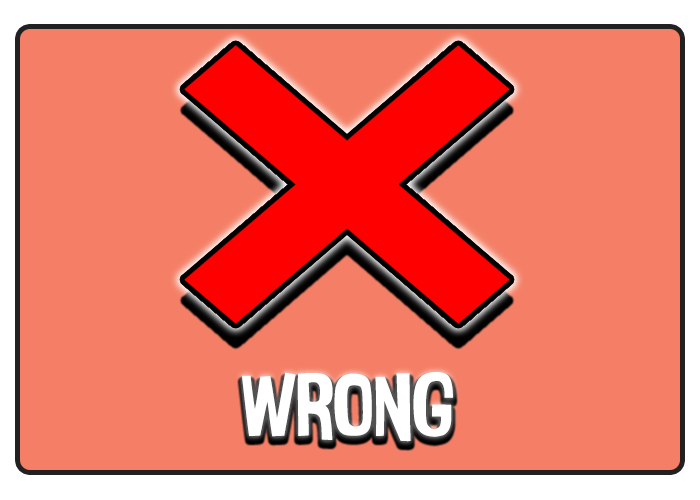
<style>
.page{position:relative;width:700px;height:500px;background:#f47f66}
.page>*{position:absolute;margin:0}
.t1{font:91.7px "InsideOut";color:#ffffff;scale:0.95 1}
</style>
<div class="page">
<p class="t1" style="left:242px;top:372px;width:211px;height:70px">wrong</p>
</div>
